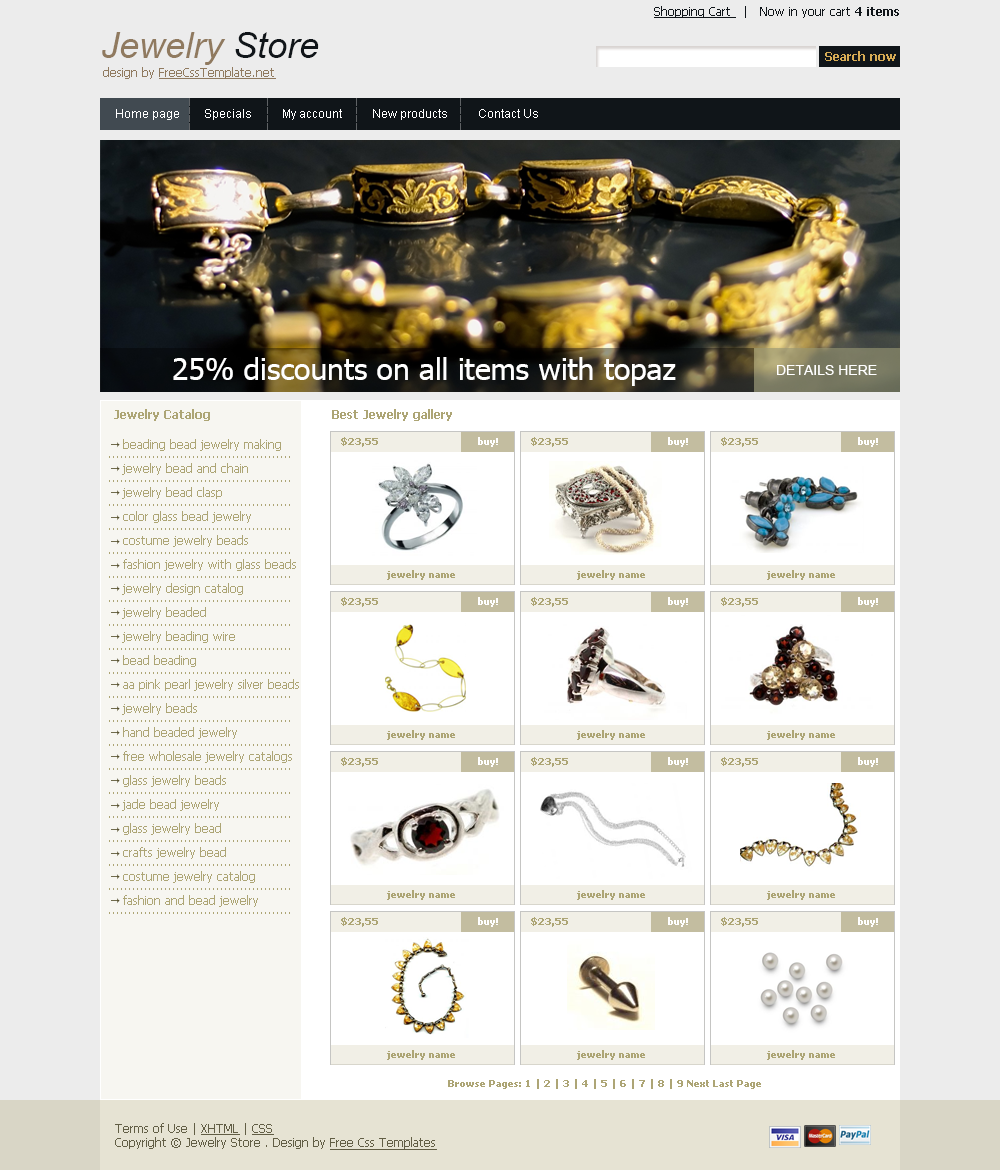
<style>
.page{position:relative;width:1000px;height:1170px;background:#ececec}
.page>*{position:absolute;margin:0}
.t1{font:12px "Tahoma";color:#101519}
.t2{font:12px "Tahoma";color:#101519;text-decoration:underline}
.t3{font:12px "Tahoma-Bold";color:#101519}
.t4{font:36px "Arial-ItalicMT";color:#907a5f}
.t5{font:36px "Arial-ItalicMT";color:#101519}
.t6{font:12px "Tahoma-Bold";color:#d7ac55}
.t7{font:12px "Tahoma";color:#907a5f;text-decoration:underline}
.t8{font:12px "Tahoma";color:#907a5f}
.t9{font:12px "ArialMT";color:#ffffff}
.t10{font:30px "Tahoma";color:#ffffff}
.t11{font:14px "ArialMT";color:#ffffff}
.t12{font:12px "Tahoma-Bold";color:#ada575}
.t13{font:10px "Tahoma-Bold";color:#ada575}
.t14{font:10px "Tahoma-Bold";color:#ffffff}
.t15{font:12px/24px "Tahoma";color:#ada575}
.t16{font:12px "Tahoma";color:#625e45}
.t17{font:12px "Tahoma";color:#625e45;text-decoration:underline}
</style>
<div class="page">
<p class="t1" style="left:654px;top:6px;width:245px;height:12px"><span class="t2">Shopping Cart </span>  |   Now in your cart <span class="t3">4 items</span></p>
<p class="t4" style="left:102px;top:32px;width:217px;height:33px">Jewelry<span class="t5"> Store</span></p>
<p class="t6" style="left:825px;top:51px;width:71px;height:10px">Search now</p>
<p class="t7" style="left:103px;top:67px;width:173px;height:12px"><span class="t8">design by </span>FreeCssTemplate.net</p>
<p class="t9" style="left:116px;top:109px;width:422px;height:11px">Home page        Specials          My account          New products          Contact Us</p>
<p class="t10" style="left:173px;top:357px;width:503px;height:29px">25% discounts on all items with topaz</p>
<p class="t11" style="left:777px;top:365px;width:100px;height:10px">DETAILS HERE</p>
<p class="t12" style="left:114px;top:409px;width:96px;height:12px">Jewelry Catalog</p>
<p class="t12" style="left:332px;top:409px;width:120px;height:12px">Best Jewelry gallery</p>
<p class="t13" style="left:341px;top:437px;width:37px;height:10px">$23,55</p>
<p class="t14" style="left:478px;top:437px;width:20px;height:10px">buy!</p>
<p class="t13" style="left:531px;top:437px;width:37px;height:10px">$23,55</p>
<p class="t14" style="left:668px;top:437px;width:20px;height:10px">buy!</p>
<p class="t13" style="left:721px;top:437px;width:37px;height:10px">$23,55</p>
<p class="t14" style="left:858px;top:437px;width:20px;height:10px">buy!</p>
<p class="t15" style="left:122px;top:439px;width:177px;height:468px">beading bead jewelry making<br>jewelry bead and chain<br>jewelry bead clasp<br>color glass bead jewelry<br>costume jewelry beads<br>fashion jewelry with glass beads<br>jewelry design catalog<br>jewelry beaded<br>jewelry beading wire<br>bead beading<br>aa pink pearl jewelry silver beads<br>jewelry beads<br>hand beaded jewelry<br>free wholesale jewelry catalogs<br>glass jewelry beads<br>jade bead jewelry<br>glass jewelry bead<br>crafts jewelry bead<br>costume jewelry catalog<br>fashion and bead jewelry</p>
<p class="t13" style="left:387px;top:570px;width:68px;height:10px">jewelry name</p>
<p class="t13" style="left:577px;top:570px;width:68px;height:10px">jewelry name</p>
<p class="t13" style="left:767px;top:570px;width:68px;height:10px">jewelry name</p>
<p class="t13" style="left:341px;top:597px;width:37px;height:10px">$23,55</p>
<p class="t14" style="left:478px;top:597px;width:20px;height:10px">buy!</p>
<p class="t13" style="left:531px;top:597px;width:37px;height:10px">$23,55</p>
<p class="t14" style="left:668px;top:597px;width:20px;height:10px">buy!</p>
<p class="t13" style="left:721px;top:597px;width:37px;height:10px">$23,55</p>
<p class="t14" style="left:858px;top:597px;width:20px;height:10px">buy!</p>
<p class="t13" style="left:387px;top:730px;width:68px;height:10px">jewelry name</p>
<p class="t13" style="left:577px;top:730px;width:68px;height:10px">jewelry name</p>
<p class="t13" style="left:767px;top:730px;width:68px;height:10px">jewelry name</p>
<p class="t13" style="left:341px;top:757px;width:37px;height:10px">$23,55</p>
<p class="t14" style="left:478px;top:757px;width:20px;height:10px">buy!</p>
<p class="t13" style="left:531px;top:757px;width:37px;height:10px">$23,55</p>
<p class="t14" style="left:668px;top:757px;width:20px;height:10px">buy!</p>
<p class="t13" style="left:721px;top:757px;width:37px;height:10px">$23,55</p>
<p class="t14" style="left:858px;top:757px;width:20px;height:10px">buy!</p>
<p class="t13" style="left:387px;top:890px;width:68px;height:10px">jewelry name</p>
<p class="t13" style="left:577px;top:890px;width:68px;height:10px">jewelry name</p>
<p class="t13" style="left:767px;top:890px;width:68px;height:10px">jewelry name</p>
<p class="t13" style="left:341px;top:917px;width:37px;height:10px">$23,55</p>
<p class="t14" style="left:478px;top:917px;width:20px;height:10px">buy!</p>
<p class="t13" style="left:531px;top:917px;width:37px;height:10px">$23,55</p>
<p class="t14" style="left:668px;top:917px;width:20px;height:10px">buy!</p>
<p class="t13" style="left:721px;top:917px;width:37px;height:10px">$23,55</p>
<p class="t14" style="left:858px;top:917px;width:20px;height:10px">buy!</p>
<p class="t13" style="left:387px;top:1050px;width:68px;height:10px">jewelry name</p>
<p class="t13" style="left:577px;top:1050px;width:68px;height:10px">jewelry name</p>
<p class="t13" style="left:767px;top:1050px;width:68px;height:10px">jewelry name</p>
<p class="t13" style="left:448px;top:1079px;width:313px;height:10px">Browse Pages: 1 | 2 | 3 | 4 | 5 | 6 | 7 | 8 | 9 Next Last Page</p>
<p class="t16" style="left:115px;top:1123px;width:322px;height:27px">Terms of Use | <span class="t17">XHTML</span> | <span class="t17">CSS<br></span>Copyright © Jewelry Store . Design by <span class="t17">Free Css Templates</span></p>
</div>
